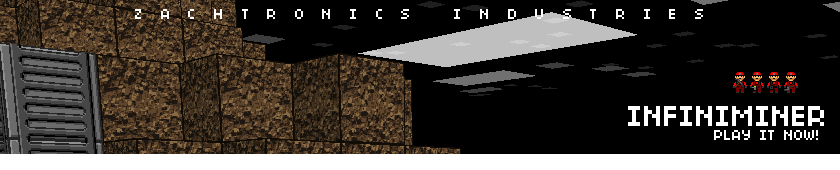
<style>
.page{position:relative;width:840px;height:170px;background:#000000}
.page>*{position:absolute;margin:0}
.t1{font:16px "04b03";letter-spacing:1.1em;color:#ffffff}
.t2{font:16px/14px "04b03";color:#ffffff}
.t3{font:32px "04b03";color:#ffffff}
</style>
<div class="page">
<p class="t1" style="left:135px;top:9px;width:568px;height:10px">ZACHTRONICS INDUSTRIES</p>
<p class="t2" style="left:628px;top:106px;width:196px;height:34px;text-align:right"><span class="t3">INFINIMINER<br></span>PLAY IT NOW!</p>
</div>
